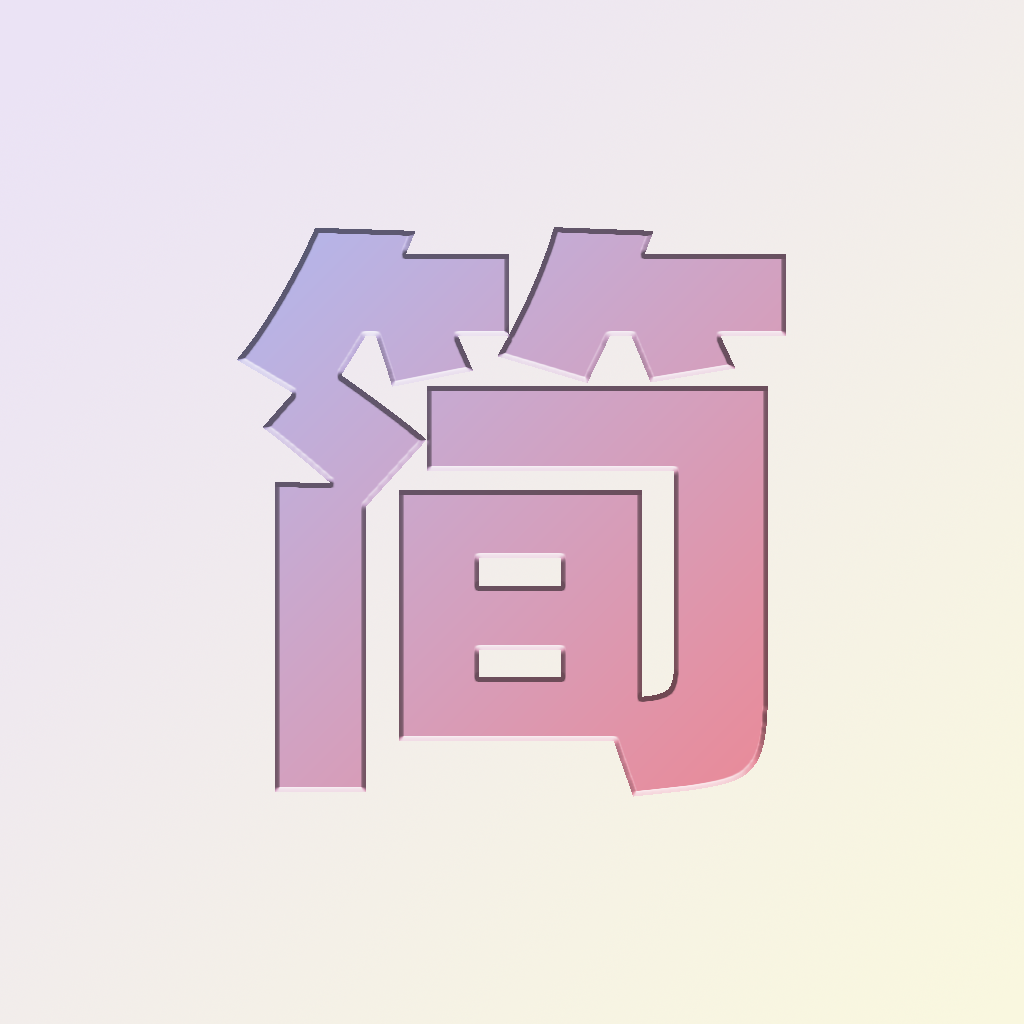
<style>
.page{position:relative;width:1024px;height:1024px}
.page>*{position:absolute;margin:0}
.t1{font:604.6px "AlibabaPuHuiTi_3_115_Black"}
</style>
<div class="page">
<p class="t1" style="left:237px;top:227px;width:549px;height:570px">简</p>
</div>
